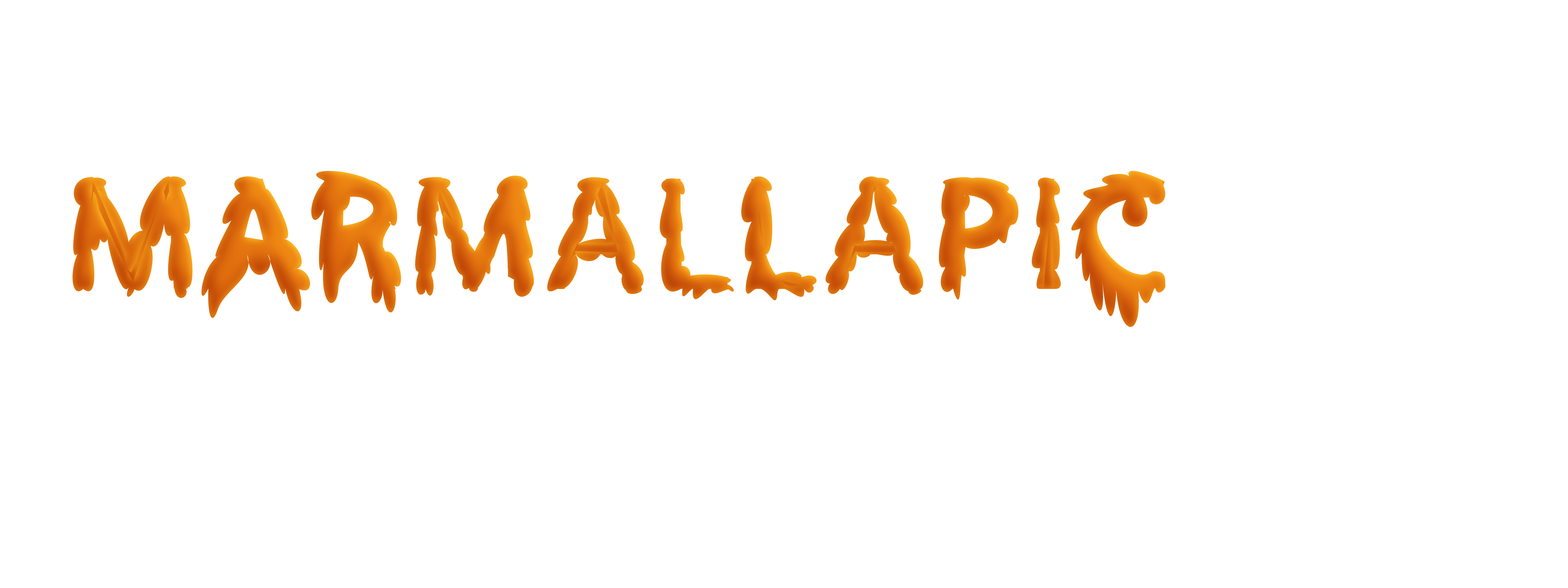
<style>
.page{position:relative;width:1568px;height:588px;background:#ffffff}
.page>*{position:absolute;margin:0}
.t1{font:163.3px "MyriadPro-Regular";letter-spacing:0.05em;color:#dd6d0e}
.t2{font:163.3px "MyriadPro-Regular";color:#dd6d0e}
</style>
<div class="page">
<p class="t1" style="left:75px;top:177px;width:1090px;height:114px">MARMALLAPIC<br><span class="t2">5</span>RMALLAPPIC</p>
</div>
